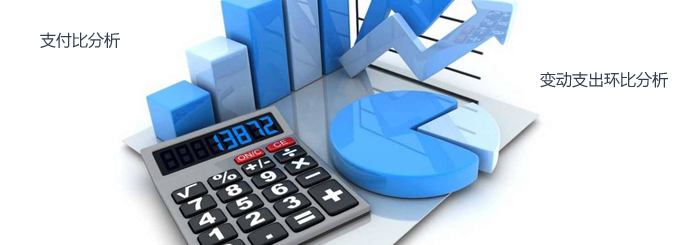
<style>
.page{position:relative;width:700px;height:245px;background:#ffffff}
.page>*{position:absolute;margin:0}
.t1{font:16px "MicrosoftYaHei";color:#333e50}
</style>
<div class="page">
<p class="t1" style="left:303px;top:21px;width:64px;height:16px">资金安排</p>
<p class="t1" style="left:40px;top:32px;width:80px;height:16px">支付比分析</p>
<p class="t1" style="left:482px;top:71px;width:96px;height:16px">执行情况分析</p>
<p class="t1" style="left:540px;top:71px;width:128px;height:17px">变动支出环比分析</p>
<p class="t1" style="left:208px;top:96px;width:64px;height:16px">支出地区</p>
<p class="t1" style="left:311px;top:161px;width:63px;height:17px">支出明细</p>
</div>
